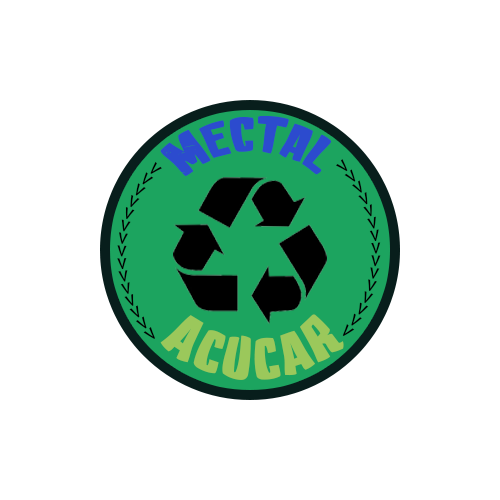
<style>
.page{position:relative;width:500px;height:500px;background:#ffffff}
.page>*{position:absolute;margin:0}
.t1{font:29.2px "EdWoodMovies";color:#2c4bce;scale:1.1 1}
.t2{font:18.1px "ArialMT";color:#000000}
.t3{font:18px "ArialMT";color:#000000}
.t4{font:35px "EdWoodMovies";color:#9bc85b;scale:0.97 1}
</style>
<div class="page">
<p class="t1" style="left:160px;top:115px;width:172px;height:61px">Mectal</p>
<p class="t2" style="left:117px;top:161px;width:45px;height:178px;rotate:91deg">&gt;&gt;&gt;&gt;&gt;&gt;&gt;&gt;&gt;&gt;&gt;&gt;&gt;&gt;&gt;</p>
<p class="t3" style="left:336px;top:159px;width:45px;height:178px;rotate:89deg">&gt;&gt;&gt;&gt;&gt;&gt;&gt;&gt;&gt;&gt;&gt;&gt;&gt;&gt;&gt;</p>
<p class="t4" style="left:160px;top:314px;width:184px;height:66px">Acucar</p>
</div>
